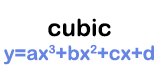
<style>
.page{position:relative;width:160px;height:75px;background:#ffffff}
.page>*{position:absolute;margin:0}
.t1{font:20px "ArialRoundedMTBold";color:#6485e3}
.t2{font:24px "ArialRoundedMTBold";color:#000000}
</style>
<div class="page">
<p class="t1" style="left:4px;top:18px;width:150px;height:47px;text-align:center"><span class="t2">cubic<br></span>y=ax3+bx2+cx+d</p>
</div>
